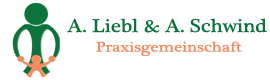
<style>
.page{position:relative;width:270px;height:80px;background:#ffffff}
.page>*{position:absolute;margin:0}
.t1{font:19px "PlantagenetCherokee";color:#0d733d;scale:1.1 1}
.t2{font:14.2px "PlantagenetCherokee";color:#f38c60;scale:1.2 1}
</style>
<div class="page">
<p class="t1" style="left:67px;top:18px;width:200px;height:15px">A. Liebl &amp; A. Schwind</p>
<p class="t2" style="left:96px;top:41px;width:146px;height:16px">Praxisgemeinschaft</p>
</div>
